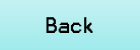
<style>
.page{position:relative;width:140px;height:50px}
.page>*{position:absolute;margin:0}
.t1{font:18px "Terminal";color:#000000;scale:0.91 1}
</style>
<div class="page">
<p class="t1" style="left:46px;top:17px;width:47px;height:16px">Back</p>
</div>
